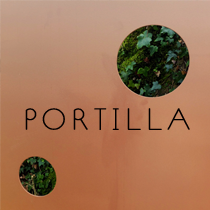
<style>
.page{position:relative;width:210px;height:210px}
.page>*{position:absolute;margin:0}
.t1{font:27px "SusannaRegular";letter-spacing:0.18em;color:#040000;font-weight:bold}
</style>
<div class="page">
<p class="t1" style="left:25px;top:108px;width:165px;height:22px">PORTILLA</p>
</div>
